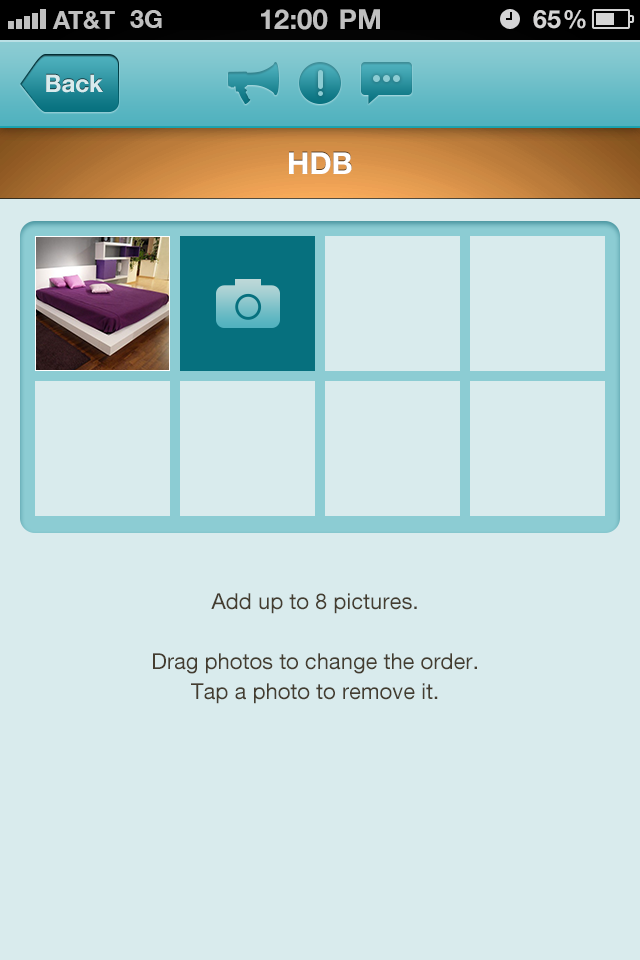
<style>
.page{position:relative;width:640px;height:960px;background:#d9ebed}
.page>*{position:absolute;margin:0}
.t1{font:24px "HelveticaNeueLTCom-Bd";color:#d9ebed}
.t2{font:30px "HelveticaNeueLTCom-Bd";color:#ffffff}
.t3{font:22px/30px "HelveticaNeueLTCom-Roman";color:#443d30}
</style>
<div class="page">
<p class="t1" style="left:46px;top:74px;width:57px;height:19px">Back</p>
<p class="t2" style="left:289px;top:152px;width:63px;height:22px">HDB</p>
<p class="t3" style="left:153px;top:593px;width:324px;height:111px;text-align:center">Add up to 8 pictures.<br><br>Drag photos to change the order.<br>Tap a photo to remove it.</p>
</div>
